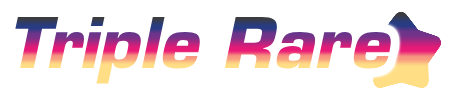
<style>
.page{position:relative;width:455px;height:100px;background:#ffffff}
.page>*{position:absolute;margin:0}
.t1{font:68px "Eurostile-BoldOblique"}
</style>
<div class="page">
<p class="t1" style="left:15px;top:16px;width:376px;height:68px">Triple Rare</p>
</div>
